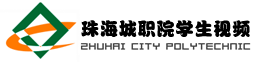
<style>
.page{position:relative;width:256px;height:62px;background:#ffffff}
.page>*{position:absolute;margin:0}
.t1{font:18px "FZPWJW--GB1-0";letter-spacing:0.05em;color:#000000}
</style>
<div class="page">
<p class="t1" style="left:81px;top:20px;width:169px;height:17px">珠海城职院学生视频</p>
</div>
